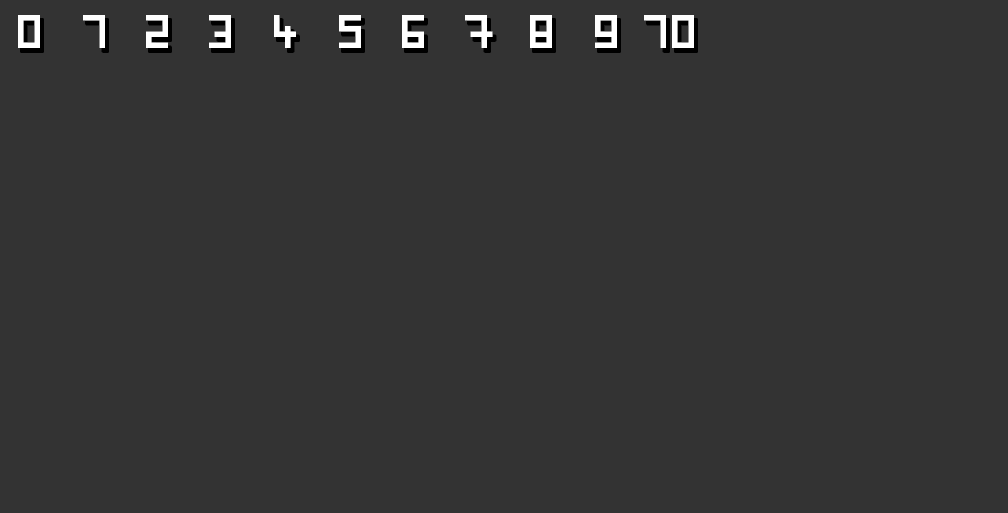
<style>
.page{position:relative;width:1008px;height:513px;background:#333333}
.page>*{position:absolute;margin:0}
.t1{font:44px "Pixel-Art";color:#ffffff}
</style>
<div class="page">
<p class="t1" style="left:18px;top:15px;width:22px;height:33px">0</p>
<p class="t1" style="left:83px;top:15px;width:22px;height:33px">1</p>
<p class="t1" style="left:146px;top:15px;width:22px;height:33px">2</p>
<p class="t1" style="left:209px;top:15px;width:22px;height:33px">3</p>
<p class="t1" style="left:274px;top:15px;width:22px;height:33px">4</p>
<p class="t1" style="left:339px;top:15px;width:22px;height:33px">5</p>
<p class="t1" style="left:402px;top:15px;width:22px;height:33px">6</p>
<p class="t1" style="left:465px;top:15px;width:28px;height:33px">7</p>
<p class="t1" style="left:530px;top:15px;width:22px;height:33px">8</p>
<p class="t1" style="left:595px;top:15px;width:22px;height:33px">9</p>
<p class="t1" style="left:644px;top:15px;width:50px;height:33px">10</p>
</div>
